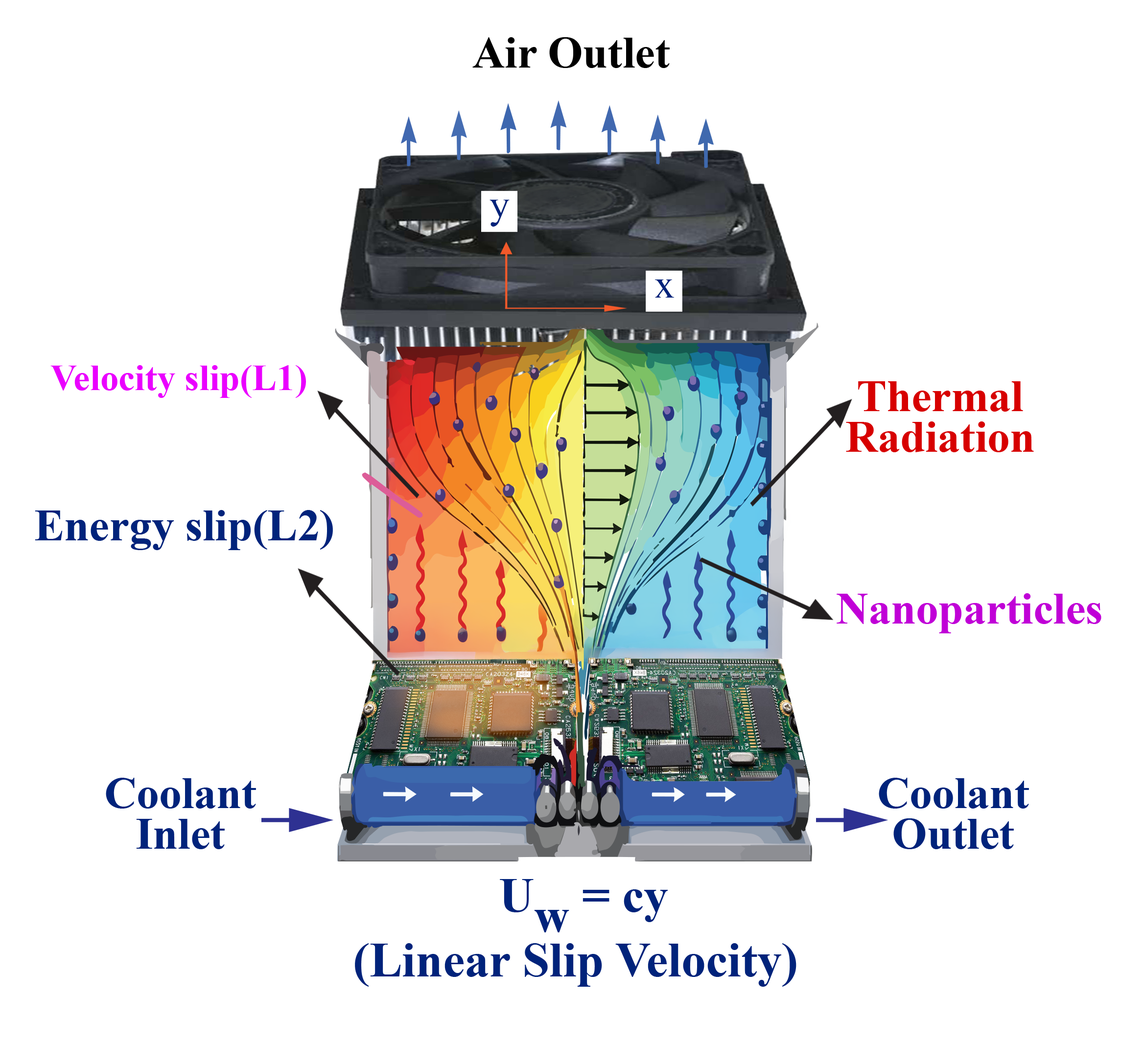
<style>
.page{position:relative;width:1144px;height:1043px;background:#ffffff}
.page>*{position:absolute;margin:0}
.t1{font:44.9px "TimesNewRomanPS-BoldMT";color:#000000}
.t2{font:40px "TimesNewRomanPSMT";color:#00237b}
.t3{font:36.7px "TimesNewRomanPS-BoldMT";color:#ea00ff}
.t4{font:44.9px/40.8px "TimesNewRomanPS-BoldMT";color:#d70000}
.t5{font:44.9px "TimesNewRomanPS-BoldMT";color:#00237b}
.t6{font:44.9px "TimesNewRomanPS-BoldMT";color:#c000d7}
.t7{font:44.9px/40.8px "TimesNewRomanPS-BoldMT";color:#00237b}
.t8{font:48.9px "TimesNewRomanPS-BoldMT";color:#00237b}
</style>
<div class="page">
<p class="t1" style="left:472px;top:37px;width:197px;height:31px">Air Outlet</p>
<p class="t2" style="left:489px;top:200px;width:20px;height:27px">y</p>
<p class="t2" style="left:655px;top:279px;width:19px;height:19px">x</p>
<p class="t3" style="left:50px;top:365px;width:256px;height:33px">Velocity slip(L1)</p>
<p class="t4" style="left:846px;top:381px;width:187px;height:71px;text-align:center">Thermal<br>Radiation</p>
<p class="t5" style="left:35px;top:510px;width:298px;height:40px">Energy slip(L2)</p>
<p class="t6" style="left:836px;top:593px;width:265px;height:40px">Nanoparticles</p>
<p class="t7" style="left:106px;top:778px;width:150px;height:71px;text-align:center">Coolant<br>Inlet</p>
<p class="t7" style="left:878px;top:778px;width:151px;height:71px;text-align:center">Coolant<br>Outlet</p>
<p class="t8" style="left:500px;top:879px;width:167px;height:53px">Uw = cy</p>
<p class="t8" style="left:355px;top:943px;width:441px;height:43px">(Linear Slip Velocity)</p>
</div>
